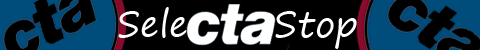
<style>
.page{position:relative;width:480px;height:50px;background:#000000}
.page>*{position:absolute;margin:0}
.t1{font:36px "SegoePrint";color:#ffffff}
</style>
<div class="page">
<p class="t1" style="left:118px;top:7px;width:239px;height:42px">Sele      Stop</p>
</div>
